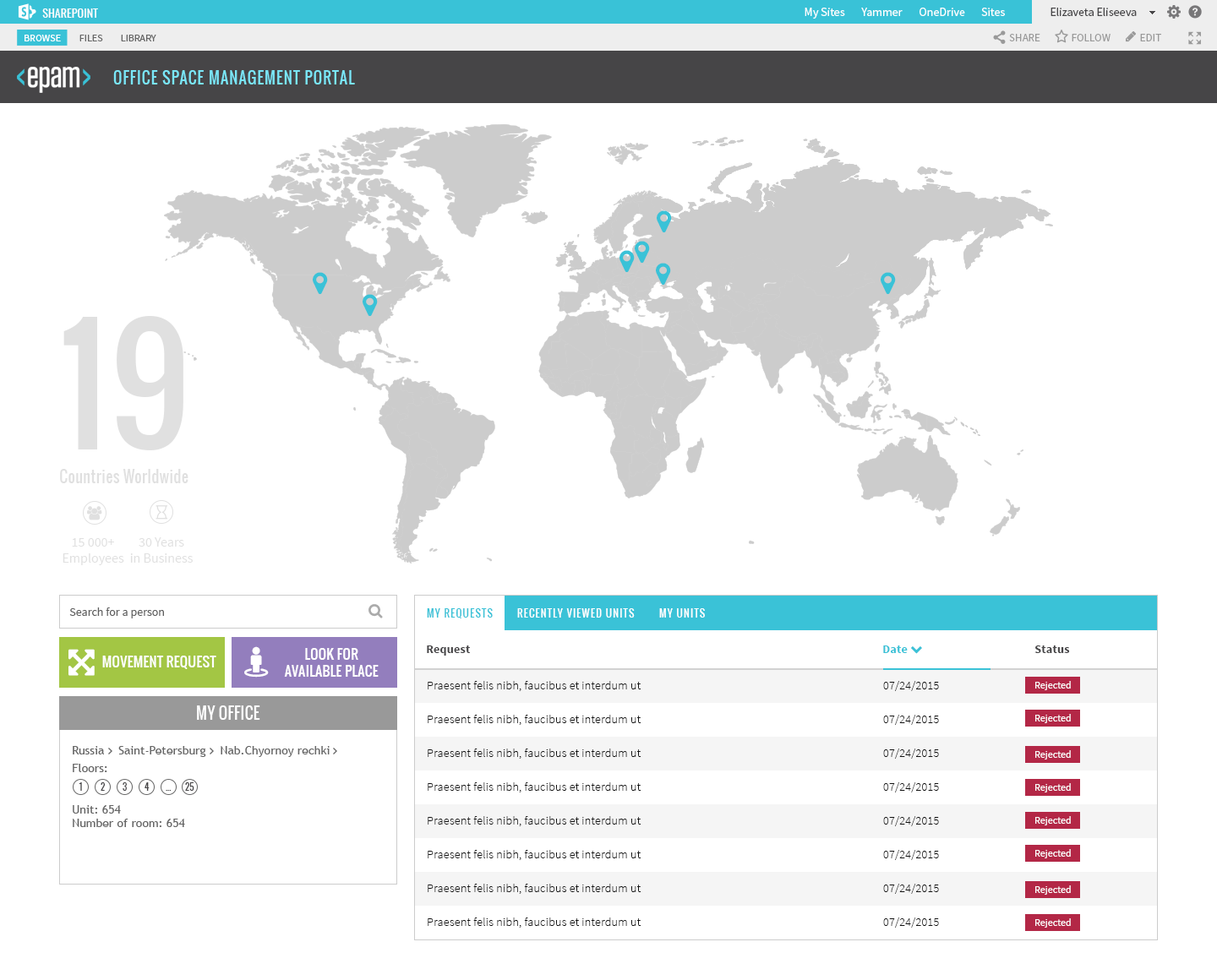
<style>
.page{position:relative;width:1217px;height:980px;background:#ffffff}
.page>*{position:absolute;margin:0}
.t1{font:15.2px "Oswald-Regular";letter-spacing:0.06em;color:#7ae6f7;text-transform:uppercase}
.t2{font:152.1px "Oswald-Regular";letter-spacing:0.02em;color:#e0e0e0}
.t3{font:15.2px "Oswald-Regular";letter-spacing:0.02em;color:#e0e0e0}
.t4{font:13.5px "SourceSansPro-Regular";color:#e0e0e0}
.t5{font:11.8px "SourceSansPro-Regular";color:#5e5e5e}
.t6{font:10.1px "Oswald-Regular";letter-spacing:0.1em;color:#3ac2d7;text-transform:uppercase}
.t7{font:10.1px "Oswald-Regular";letter-spacing:0.1em;color:#ffffff;text-transform:uppercase}
.t8{font:13.5px "Oswald-Regular";letter-spacing:0.02em;color:#ffffff;text-transform:uppercase}
.t9{font:11.8px/33.8px "SourceSansPro-Light";letter-spacing:0.02em;color:#111111}
.t10{font:10.1px "SourceSansPro-Regular";color:#feffff}
.t11{font:15.2px "Oswald-Regular";letter-spacing:0.02em;color:#ffffff;text-transform:uppercase}
</style>
<div class="page">
<p class="t1" style="left:113px;top:70px;width:242px;height:14px">office space management portal</p>
<p class="t2" style="left:63px;top:316px;width:120px;height:134px">19</p>
<p class="t3" style="left:60px;top:469px;width:128px;height:14px">Countries Worldwide</p>
<p class="t4" style="left:63px;top:538px;width:61px;height:27px;text-align:center">15 000+<br>Employees</p>
<p class="t4" style="left:130px;top:537px;width:63px;height:26px;text-align:center">30 Years<br>in Business</p>
<p class="t5" style="left:69px;top:607px;width:95px;height:11px">Search for a person</p>
<p class="t6" style="left:427px;top:608px;width:66px;height:10px">my requests</p>
<p class="t7" style="left:517px;top:608px;width:118px;height:10px">recently viewed units</p>
<p class="t7" style="left:659px;top:608px;width:46px;height:10px">my units</p>
<p class="t8" style="left:284px;top:648px;width:95px;height:29px;text-align:center">LOOK FOR<br>AVAILABLE PLACE</p>
<p class="t8" style="left:102px;top:656px;width:114px;height:13px">MOVEMENT REQUEST</p>
<p class="t9" style="left:428px;top:681px;width:511px;height:247px">Praesent felis nibh, faucibus et interdum ut        07/24/2015<br>Praesent felis nibh, faucibus et interdum ut        07/24/2015<br>Praesent felis nibh, faucibus et interdum ut        07/24/2015<br>Praesent felis nibh, faucibus et interdum ut        07/24/2015<br>Praesent felis nibh, faucibus et interdum ut        07/24/2015<br>Praesent felis nibh, faucibus et interdum ut        07/24/2015<br>Praesent felis nibh, faucibus et interdum ut        07/24/2015<br>Praesent felis nibh, faucibus et interdum ut        07/24/2015</p>
<p class="t10" style="left:1035px;top:681px;width:35px;height:9px">Rejected</p>
<p class="t11" style="left:197px;top:705px;width:63px;height:15px">my office</p>
<p class="t10" style="left:1035px;top:714px;width:35px;height:9px">Rejected</p>
<p class="t10" style="left:1035px;top:750px;width:35px;height:10px">Rejected</p>
<p class="t10" style="left:1035px;top:783px;width:35px;height:10px">Rejected</p>
<p class="t10" style="left:1035px;top:816px;width:35px;height:9px">Rejected</p>
<p class="t10" style="left:1035px;top:849px;width:35px;height:9px">Rejected</p>
<p class="t10" style="left:1035px;top:885px;width:35px;height:10px">Rejected</p>
<p class="t10" style="left:1035px;top:918px;width:35px;height:10px">Rejected</p>
</div>
